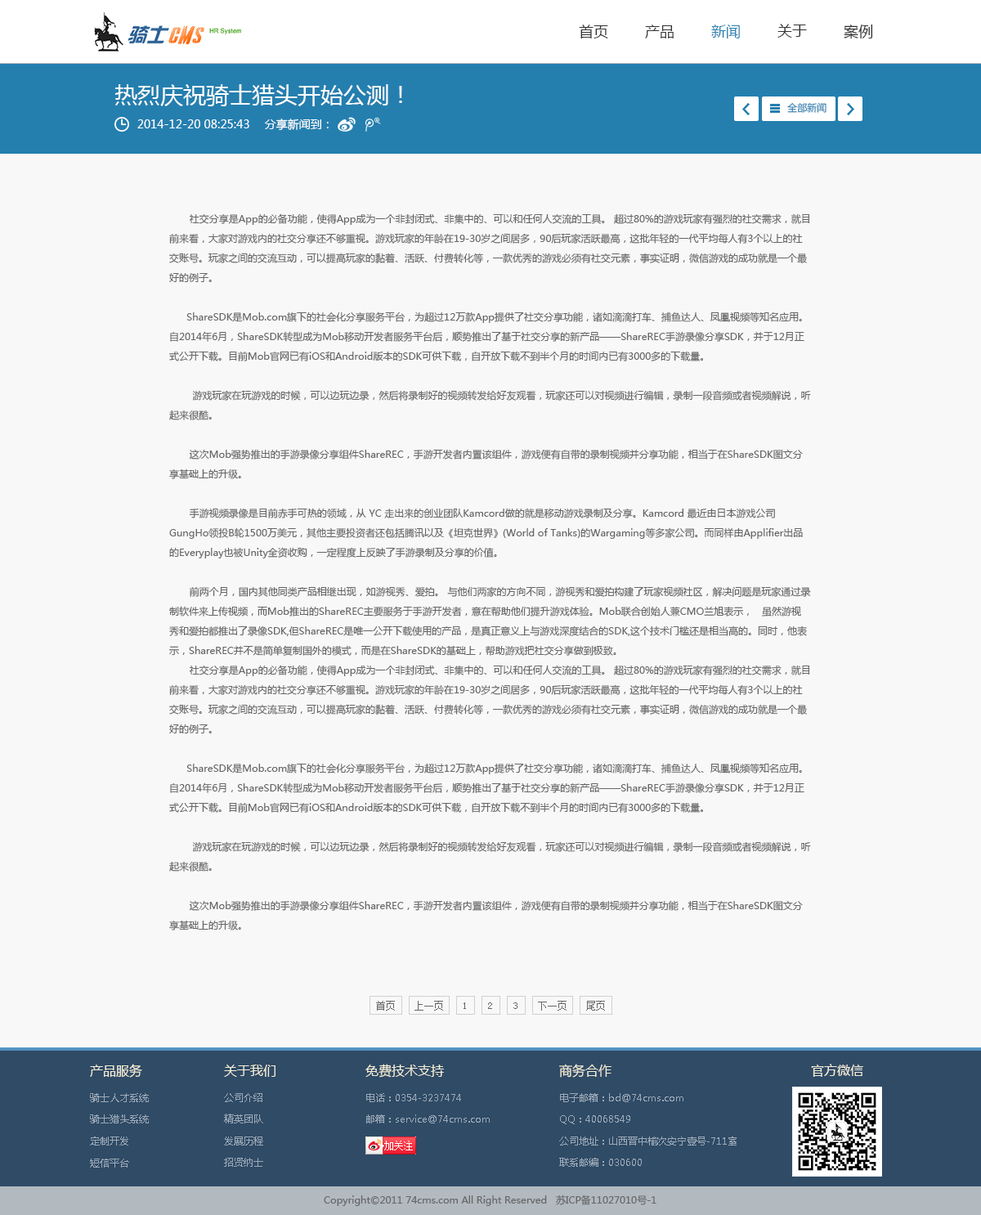
<style>
.page{position:relative;width:981px;height:1215px;background:#f8f8f8}
.page>*{position:absolute;margin:0}
.t1{font:14.7px "MicrosoftYaHei";color:#333333}
.t2{font:14.7px "MicrosoftYaHei";color:#247faf}
.t3{font:22.9px "MicrosoftYaHei";color:#ffffff}
.t4{font:9.8px "MicrosoftYaHei";color:#247faf}
.t5{font:11.4px "MicrosoftYaHei";color:#ffffff}
.t6{font:9.8px/19.6px "MicrosoftYaHei";color:#666666}
.t7{font:9.8px "SimSun";color:#666666}
.t8{font:13.1px "MicrosoftYaHei";color:#f6eed7}
.t9{font:9.8px "MicrosoftYaHei";color:#9da9b7}
.t10{font:9.8px "MicrosoftYaHei";color:#666666}
</style>
<div class="page">
<p class="t1" style="left:579px;top:25px;width:29px;height:13px">首页</p>
<p class="t1" style="left:645px;top:25px;width:29px;height:13px">产品</p>
<p class="t2" style="left:711px;top:25px;width:29px;height:13px">新闻</p>
<p class="t1" style="left:778px;top:24px;width:29px;height:14px">关于</p>
<p class="t1" style="left:844px;top:25px;width:29px;height:14px">案例</p>
<p class="t3" style="left:114px;top:84px;width:288px;height:22px">热烈庆祝骑士猎头开始公测！</p>
<p class="t4" style="left:787px;top:103px;width:40px;height:10px">全部新闻</p>
<p class="t5" style="left:137px;top:119px;width:112px;height:9px">2014-12-20 08:25:43</p>
<p class="t5" style="left:264px;top:119px;width:65px;height:11px">分享新闻到：</p>
<p class="t6" style="left:169px;top:213px;width:642px;height:718px">社交分享是App的必备功能，使得App成为一个非封闭式、非集中的、可以和任何人交流的工具。 超过80%的游戏玩家有强烈的社交需求，就目前来看，大家对游戏内的社交分享还不够重视。游戏玩家的年龄在19-30岁之间居多，90后玩家活跃最高，这批年轻的一代平均每人有3个以上的社交账号。玩家之间的交流互动，可以提高玩家的黏着、活跃、付费转化等，一款优秀的游戏必须有社交元素，事实证明，微信游戏的成功就是一个最好的例子。<br><br>      ShareSDK是Mob.com旗下的社会化分享服务平台，为超过12万款App提供了社交分享功能，诸如滴滴打车、捕鱼达人、凤凰视频等知名应用。自2014年6月，ShareSDK转型成为Mob移动开发者服务平台后，顺势推出了基于社交分享的新产品——ShareREC手游录像分享SDK，并于12月正式公开下载。目前Mob官网已有iOS和Android版本的SDK可供下载，自开放下载不到半个月的时间内已有3000多的下载量。<br><br>        游戏玩家在玩游戏的时候，可以边玩边录，然后将录制好的视频转发给好友观看，玩家还可以对视频进行编辑，录制一段音频或者视频解说，听起来很酷。<br><br>       这次Mob强势推出的手游录像分享组件ShareREC，手游开发者内置该组件，游戏便有自带的录制视频并分享功能，相当于在ShareSDK图文分享基础上的升级。<br><br>       手游视频录像是目前赤手可热的领域，从 YC 走出来的创业团队Kamcord做的就是移动游戏录制及分享。Kamcord 最近由日本游戏公司GungHo领投B轮1500万美元，其他主要投资者还包括腾讯以及《坦克世界》(World of Tanks)的Wargaming等多家公司。而同样由Applifier出品 的Everyplay也被Unity全资收购，一定程度上反映了手游录制及分享的价值。<br><br>       前两个月，国内其他同类产品相继出现，如游视秀、爱拍。 与他们两家的方向不同，游视秀和爱拍构建了玩家视频社区，解决问题是玩家通过录制软件来上传视频，而Mob推出的ShareREC主要服务于手游开发者，意在帮助他们提升游戏体验。Mob联合创始人兼CMO兰旭表示，   虽然游视秀和爱拍都推出了录像SDK,但ShareREC是唯一公开下载使用的产品，是真正意义上与游戏深度结合的SDK,这个技术门槛还是相当高的。同时，他表示，ShareREC并不是简单复制国外的模式，而是在ShareSDK的基础上，帮助游戏把社交分享做到极致。<br>       社交分享是App的必备功能，使得App成为一个非封闭式、非集中的、可以和任何人交流的工具。 超过80%的游戏玩家有强烈的社交需求，就目前来看，大家对游戏内的社交分享还不够重视。游戏玩家的年龄在19-30岁之间居多，90后玩家活跃最高，这批年轻的一代平均每人有3个以上的社交账号。玩家之间的交流互动，可以提高玩家的黏着、活跃、付费转化等，一款优秀的游戏必须有社交元素，事实证明，微信游戏的成功就是一个最好的例子。<br><br>      ShareSDK是Mob.com旗下的社会化分享服务平台，为超过12万款App提供了社交分享功能，诸如滴滴打车、捕鱼达人、凤凰视频等知名应用。自2014年6月，ShareSDK转型成为Mob移动开发者服务平台后，顺势推出了基于社交分享的新产品——ShareREC手游录像分享SDK，并于12月正式公开下载。目前Mob官网已有iOS和Android版本的SDK可供下载，自开放下载不到半个月的时间内已有3000多的下载量。<br><br>        游戏玩家在玩游戏的时候，可以边玩边录，然后将录制好的视频转发给好友观看，玩家还可以对视频进行编辑，录制一段音频或者视频解说，听起来很酷。<br><br>       这次Mob强势推出的手游录像分享组件ShareREC，手游开发者内置该组件，游戏便有自带的录制视频并分享功能，相当于在ShareSDK图文分享基础上的升级。<br><br>       手游视频录像是目前赤手可热的领域，从 YC 走出来的创业团队Kamcord做的就是移动游戏录制及分享。Kamcord 最近由日本游戏公司GungHo领投B轮1500万美元，其他主要投资者还包括腾讯以及《坦克世界》(World of Tanks)的Wargaming等多家公司。而同样由Applifier出品 的Everyplay也被Unity全资收购，一定程度上反映了手游录制及分享的价值。<br><br>       前两个月，国内其他同类产品相继出现，如游视秀、爱拍。 与他们两家的方向不同，游视秀和爱拍构建了玩家视频社区，解决问题是玩家通过录制软件来上传视频，而Mob推出的ShareREC主要服务于手游开发者，意在帮助他们提升游戏体验。Mob联合创始人兼CMO兰旭表示，   虽然游视秀和爱拍都推出了录像SDK,但ShareREC是唯一公开下载使用的产品，是真正意义上与游戏深度结合的SDK,这个技术门槛还是相当高的。同时，他表示，ShareREC并不是简单复制国外的模式，而是在ShareSDK的基础上，帮助游戏把社交分享做到极致。<br><br>    根据ShareSDK的数据统计，分享出去的链接回流率可以高达百分之700多，而且每个被分享出去的视频，好友观看的同时可以直接下载游戏，转化率最高可以达到20%，这从根本上解决了游戏推广单个用户成本高的问题。</p>
<p class="t7" style="left:376px;top:1001px;width:19px;height:10px">首页</p>
<p class="t7" style="left:415px;top:1001px;width:28px;height:10px">上一页</p>
<p class="t7" style="left:538px;top:1001px;width:29px;height:10px">下一页</p>
<p class="t7" style="left:586px;top:1001px;width:19px;height:10px">尾页</p>
<p class="t7" style="left:464px;top:1003px;width:2px;height:6px">1</p>
<p class="t7" style="left:488px;top:1003px;width:4px;height:6px">2</p>
<p class="t7" style="left:514px;top:1003px;width:4px;height:6px">3</p>
<p class="t8" style="left:90px;top:1064px;width:52px;height:14px">产品服务</p>
<p class="t8" style="left:224px;top:1065px;width:52px;height:12px">关于我们</p>
<p class="t8" style="left:366px;top:1064px;width:78px;height:14px">免费技术支持</p>
<p class="t8" style="left:559px;top:1064px;width:53px;height:14px">商务合作</p>
<p class="t8" style="left:811px;top:1064px;width:53px;height:13px">官方微信</p>
<p class="t9" style="left:90px;top:1093px;width:59px;height:9px">骑士人才系统</p>
<p class="t9" style="left:224px;top:1093px;width:38px;height:9px">公司介绍</p>
<p class="t9" style="left:366px;top:1093px;width:95px;height:9px">电话：0354-3237474</p>
<p class="t9" style="left:560px;top:1093px;width:124px;height:9px">电子邮箱：bd@74cms.com</p>
<p class="t9" style="left:90px;top:1115px;width:59px;height:9px">骑士猎头系统</p>
<p class="t9" style="left:224px;top:1114px;width:39px;height:10px">精英团队</p>
<p class="t9" style="left:366px;top:1115px;width:124px;height:9px">邮箱：service@74cms.com</p>
<p class="t9" style="left:560px;top:1115px;width:70px;height:9px">QQ：40068549</p>
<p class="t9" style="left:90px;top:1137px;width:38px;height:9px">定制开发</p>
<p class="t9" style="left:224px;top:1137px;width:39px;height:9px">发展历程</p>
<p class="t9" style="left:559px;top:1137px;width:178px;height:9px">公司地址：山西晋中榆次安宁壹号-711室</p>
<p class="t9" style="left:224px;top:1158px;width:39px;height:9px">招贤纳士</p>
<p class="t9" style="left:559px;top:1158px;width:83px;height:9px">联系邮编：030600</p>
<p class="t9" style="left:90px;top:1159px;width:39px;height:9px">短信平台</p>
<p class="t10" style="left:324px;top:1195px;width:333px;height:11px">Copyright©2011 74cms.com All Right Reserved   苏ICP备11027010号-1</p>
</div>
